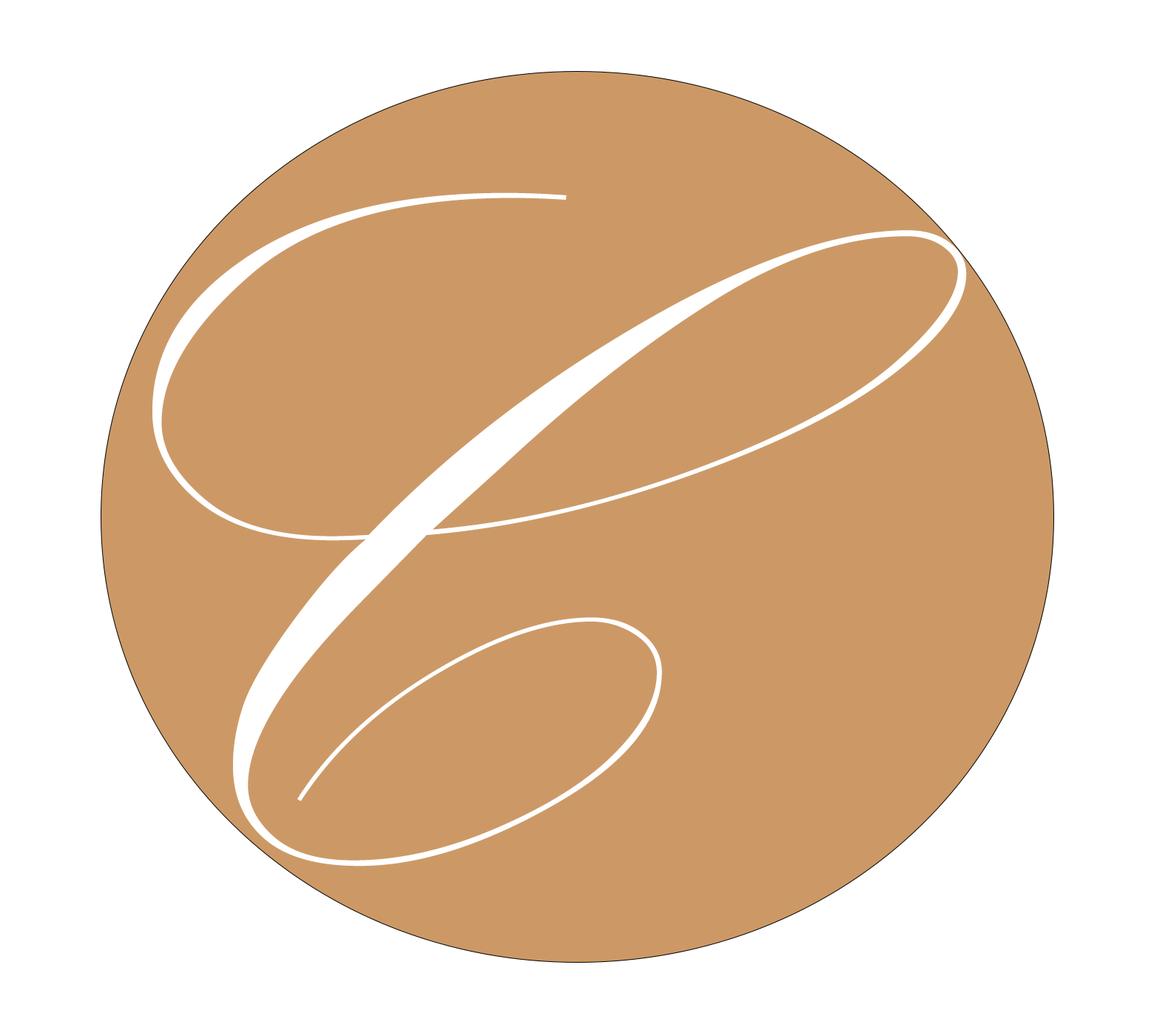
<style>
.page{position:relative;width:1154px;height:1033px;background:#cc9966}
.page>*{position:absolute;margin:0}
.t1{font:983.5px "KunstlerScript";color:#ffffff;text-transform:uppercase}
</style>
<div class="page">
<p class="t1" style="left:152px;top:192px;width:815px;height:675px">c</p>
</div>
